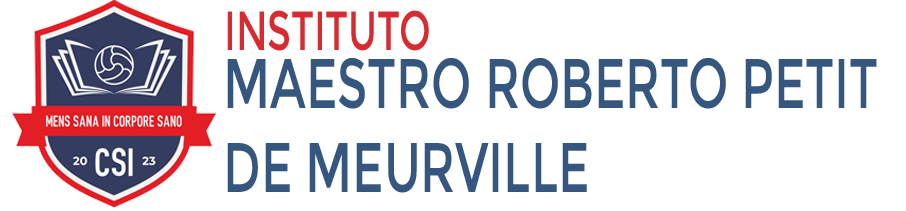
<style>
.page{position:relative;width:906px;height:211px;background:#ffffff}
.page>*{position:absolute;margin:0}
.t1{font:55px "Montserrat-Regular";color:#d62c31;scale:0.69 1}
.t2{font:70px "Montserrat-Regular";color:#35567e;scale:0.69 1}
</style>
<div class="page">
<p class="t1" style="left:227px;top:10px;width:202px;height:41px">INSTITUTO</p>
<p class="t2" style="left:227px;top:58px;width:650px;height:135px">MAESTRO ROBERTO PETIT DE MEURVILLE<br>M</p>
</div>
